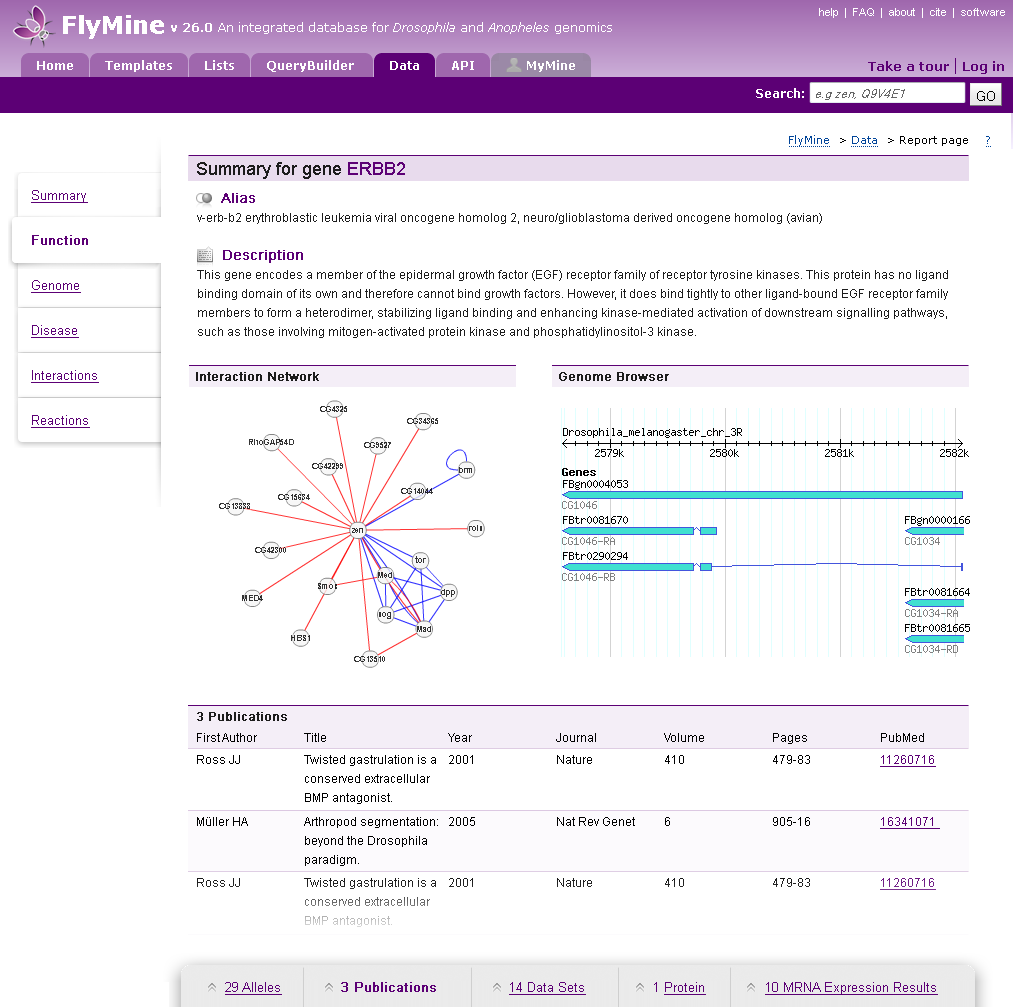
<style>
.page{position:relative;width:1013px;height:1007px;background:#ffffff}
.page>*{position:absolute;margin:0}
.t1{font:18px "ArialMT";color:#1c1c1c}
.t2{font:18px "ArialMT";color:#5c0075}
.t3{font:13px/45px "ArialMT";color:#5c0075;text-decoration:underline}
.t4{font:13px/45px "ArialMT";color:#5c0075;font-weight:bold}
.t5{font:12px/19px "ArialMT";color:#1c1c1c}
.t6{font:14px/19px "ArialMT";color:#5c0075;font-weight:bold}
.t7{font:12px "ArialMT";color:#1c1c1c;font-weight:bold}
.t8{font:12px "ArialMT";color:#000000}
.t9{font:12px/19px "ArialMT";color:#000000}
.t10{font:12px/19px "ArialMT";color:#5c0075;text-decoration:underline}
.t11{font:12px/19px "ArialMT"}
.t12{font:12px/19px "ArialMT";text-decoration:underline}
.t13{font:13px "ArialMT";color:#5c0075;text-decoration:underline}
.t14{font:13px "ArialMT";color:#5c0075}
.t15{font:13px "ArialMT";color:#5c0075;font-weight:bold}
</style>
<div class="page">
<p class="t1" style="left:197px;top:162px;width:208px;height:17px">Summary for gene <span class="t2">ERBB2</span></p>
<p class="t3" style="left:31px;top:190px;width:68px;height:238px">Summary<br><span class="t4">Function<br></span>Genome<br>Disease<br>Interactions<br>Reactions</p>
<p class="t5" style="left:197px;top:193px;width:625px;height:31px"><span class="t6">     Alias<br></span>v-erb-b2 erythroblastic leukemia viral oncogene homolog 2, neuro/glioblastoma derived oncogene homolog (avian)</p>
<p class="t5" style="left:197px;top:250px;width:751px;height:88px"><span class="t6">     Description</span><br>This gene encodes a member of the epidermal growth factor (EGF) receptor family of receptor tyrosine kinases. This protein has no ligand<br>binding domain of its own and therefore cannot bind growth factors. However, it does bind tightly to other ligand-bound EGF receptor family<br>members to form a heterodimer, stabilizing ligand binding and enhancing kinase-mediated activation of downstream signalling pathways,<br>such as those involving mitogen-activated protein kinase and phosphatidylinositol-3 kinase.</p>
<p class="t7" style="left:196px;top:372px;width:123px;height:9px">Interaction Network</p>
<p class="t7" style="left:559px;top:372px;width:110px;height:9px">Genome Browser</p>
<p class="t7" style="left:197px;top:712px;width:90px;height:9px">3 Publications</p>
<p class="t8" style="left:197px;top:733px;width:727px;height:11px">First Author  Title    Year   Journal  Volume  Pages  PubMed</p>
<p class="t9" style="left:197px;top:755px;width:739px;height:49px">Ross JJ  Twisted gastrulation is a 2001   Nature  410   479-83  <span class="t10">11260716<br></span>   conserved extracellular<br>   BMP antagonist.</p>
<p class="t9" style="left:197px;top:817px;width:743px;height:49px">Müller HA  Arthropod segmentation: 2005   Nat Rev Genet 6   905-16  <span class="t10">16341071 <br></span>   beyond the Drosophila<br>   paradigm.</p>
<p class="t11" style="left:197px;top:878px;width:739px;height:49px">Ross JJ  Twisted gastrulation is a 2001   Nature  410   479-83  <span class="t12">11260716<br></span>   conserved extracellular<br>   BMP antagonist.</p>
<p class="t13" style="left:225px;top:982px;width:713px;height:13px"><span class="t14">   </span>29 Alleles       <span class="t15">3 Publications              </span>14 Data Sets<span class="t14">            1 </span>Protein             10 MRNA Expression Results</p>
</div>
